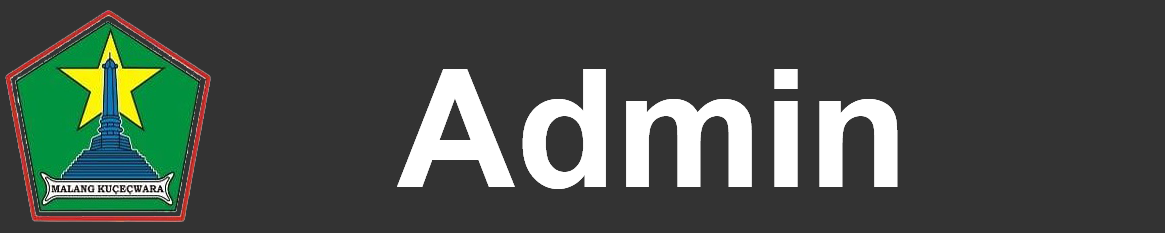
<style>
.page{position:relative;width:1165px;height:233px;background:#333333}
.page>*{position:absolute;margin:0}
.t1{font:164.4px "Arial-BoldMT";color:#ffffff}
</style>
<div class="page">
<p class="t1" style="left:397px;top:69px;width:501px;height:120px">Admin</p>
</div>
